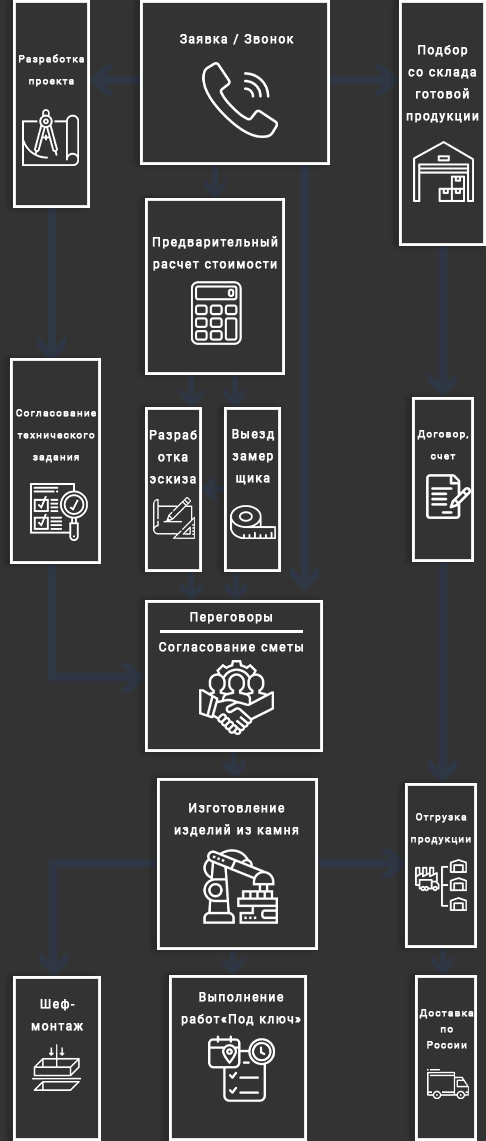
<style>
.page{position:relative;width:486px;height:1141px;background:#333333}
.page>*{position:absolute;margin:0}
.t1{font:12px "Roboto-Regular";letter-spacing:0.1em;color:#ffffff;font-weight:bold}
.t2{font:10px/22px "Roboto-Regular";letter-spacing:0.1em;color:#ffffff;font-weight:bold}
.t3{font:12px/22px "Roboto-Regular";letter-spacing:0.1em;color:#ffffff;font-weight:bold}
.t4{font:10px/16px "Roboto-Regular";letter-spacing:0.1em;color:#ffffff;font-weight:bold}
</style>
<div class="page">
<p class="t1" style="left:180px;top:34px;width:114px;height:11px">Заявка / Звонок</p>
<p class="t2" style="left:19px;top:54px;width:65px;height:33px;text-align:center">Разработка проекта</p>
<p class="t3" style="left:406px;top:45px;width:73px;height:78px;text-align:center">Подбор <br>со склада готовой продукции</p>
<p class="t3" style="left:152px;top:236px;width:126px;height:35px;text-align:center">Предварительный расчет стоимости</p>
<p class="t2" style="left:16px;top:409px;width:80px;height:54px;text-align:center">Согласование технического задания</p>
<p class="t3" style="left:149px;top:430px;width:48px;height:54px;text-align:center">Разработка эскиза</p>
<p class="t3" style="left:232px;top:429px;width:43px;height:56px;text-align:center">Выезд замерщика</p>
<p class="t2" style="left:417px;top:430px;width:52px;height:30px;text-align:center">Договор,<br>счет</p>
<p class="t1" style="left:190px;top:612px;width:82px;height:12px">Переговоры</p>
<p class="t1" style="left:159px;top:642px;width:144px;height:10px">Согласование сметы</p>
<p class="t3" style="left:174px;top:803px;width:125px;height:34px;text-align:center">Изготовление изделий из камня</p>
<p class="t2" style="left:411px;top:813px;width:60px;height:32px;text-align:center">Отгрузка продукции</p>
<p class="t3" style="left:31px;top:999px;width:52px;height:32px;text-align:center">Шеф-<br>монтаж</p>
<p class="t3" style="left:181px;top:992px;width:120px;height:34px;text-align:center">Выполнение работ«Под ключ»</p>
<p class="t4" style="left:419px;top:1009px;width:55px;height:40px;text-align:center">Доставка по России</p>
</div>
